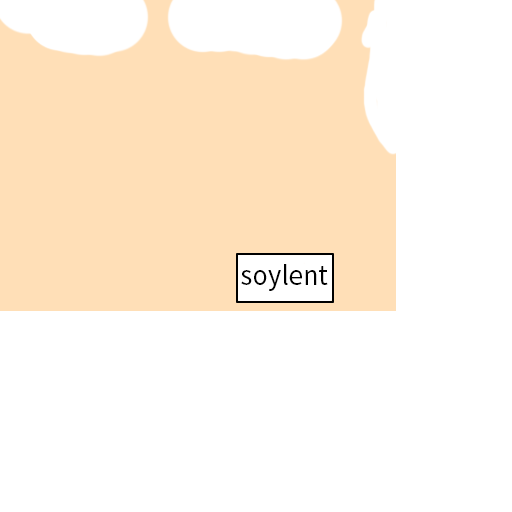
<style>
.page{position:relative;width:512px;height:512px;background:#ffffff}
.page>*{position:absolute;margin:0}
.t1{font:29.1px "SourceSansPro-Regular";color:#000000}
</style>
<div class="page">
<p class="t1" style="left:241px;top:264px;width:87px;height:27px">soylent</p>
</div>
